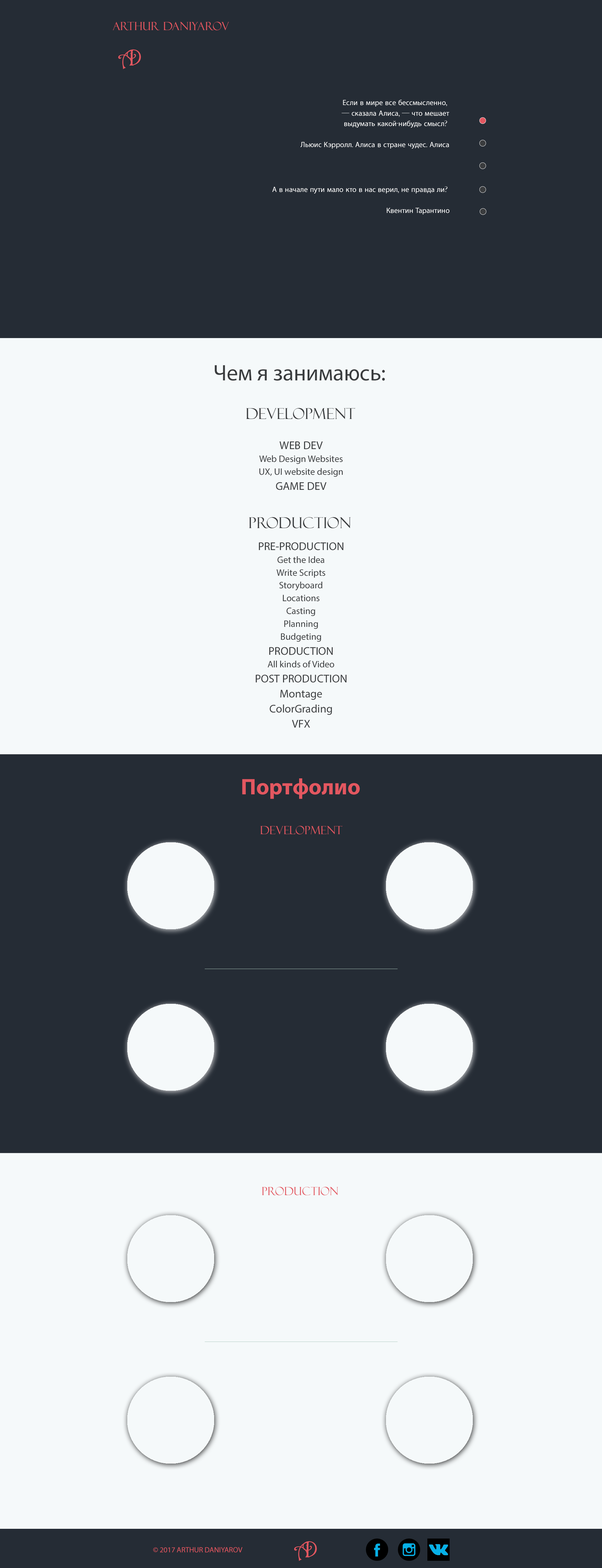
<style>
.page{position:relative;width:602px;height:1568px;background:#f5f9fa}
.page>*{position:absolute;margin:0}
.t1{font:11.3px "FelixTitlingMT";color:#e35760}
.t2{font:22.6px "Harrington";color:#e35760}
.t3{font:7.5px "MyriadPro-Regular";color:#ffffff}
.t4{font:7.5px "FelixTitlingMT";color:#ffffff}
.t5{font:22.6px "MyriadPro-Regular";color:#3a3c3e}
.t6{font:15.1px "FelixTitlingMT";color:#3a3c3e}
.t7{font:9.4px "MyriadPro-Regular";color:#3a3c3e}
.t8{font:11.3px "MyriadPro-Regular";color:#3a3c3e}
.t9{font:22.6px "MyriadPro-Bold";color:#e35760}
.t10{font:7.5px "MyriadPro-Regular";color:#e35760}
</style>
<div class="page">
<p class="t1" style="left:113px;top:22px;width:116px;height:8px">Arthur Daniyarov</p>
<p class="t2" style="left:118px;top:50px;width:16px;height:19px">A</p>
<p class="t2" style="left:127px;top:49px;width:14px;height:17px">D</p>
<p class="t3" style="left:300px;top:99px;width:149px;height:50px;text-align:right">Если в мире все бессмысленно<span class="t4">, <br>— </span>сказала Алиса<span class="t4">, — </span>что мешает<br> выдумать какой<span class="t4">-</span>нибудь смысл<span class="t4">? <br><br></span>Льюис Кэрролл<span class="t4">. </span>Алиса в стране чудес<span class="t4">. </span>Алиса</p>
<p class="t3" style="left:272px;top:186px;width:178px;height:29px;text-align:right">А в начале пути мало кто в нас верил<span class="t4">, </span>не правда ли<span class="t4">? <br></span><br>Квентин Тарантино</p>
<p class="t5" style="left:215px;top:365px;width:170px;height:16px">Чем я занимаюсь:</p>
<p class="t6" style="left:246px;top:408px;width:109px;height:11px">Development</p>
<p class="t7" style="left:259px;top:441px;width:84px;height:49px;text-align:center"><span class="t8">WEB DEV<br></span>Web Design Websites<br>UX, UI website design<br><span class="t8">GAME DEV</span></p>
<p class="t6" style="left:249px;top:517px;width:102px;height:11px">Production</p>
<p class="t7" style="left:256px;top:542px;width:91px;height:186px;text-align:center"><span class="t8">PRE-PRODUCTION<br></span>Get the Idea<br>Write Scripts<br>Storyboard<br>Locations<br>Casting<br>Planning<br>Budgeting<br><span class="t8">PRODUCTION<br></span>All kinds of Video<br><span class="t8">POST PRODUCTION<br>Montage<br>ColorGrading<br>VFX</span></p>
<p class="t9" style="left:242px;top:778px;width:118px;height:21px">Портфолио</p>
<p class="t1" style="left:260px;top:826px;width:82px;height:8px">DEVELOPMENT</p>
<p class="t1" style="left:262px;top:1187px;width:76px;height:8px">PRODUCTION</p>
<p class="t2" style="left:294px;top:1542px;width:16px;height:19px">A</p>
<p class="t2" style="left:303px;top:1541px;width:14px;height:16px">D</p>
<p class="t10" style="left:153px;top:1547px;width:89px;height:6px">© 2017 ARTHUR DANIYAROV</p>
</div>
